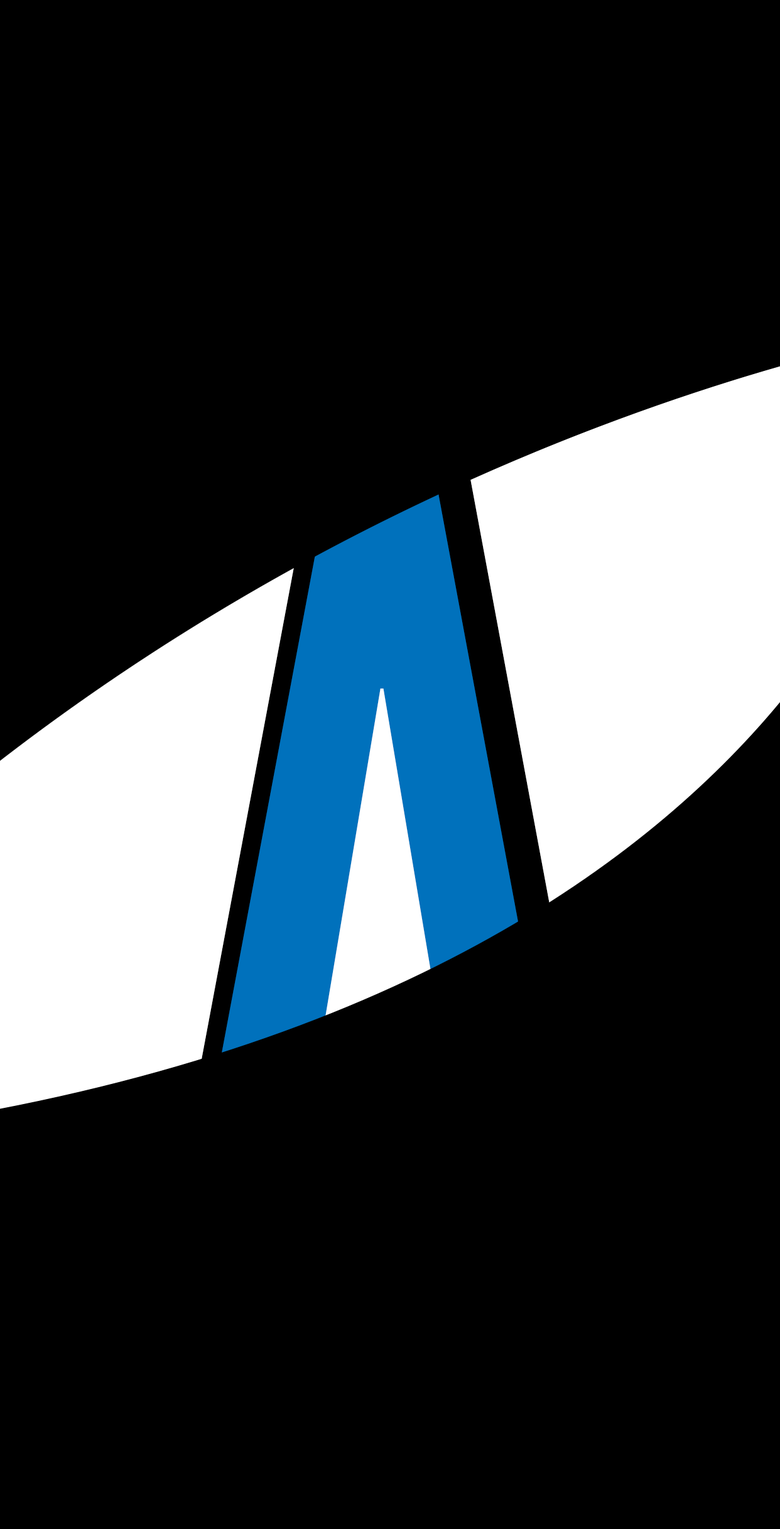
<style>
.page{position:relative;width:780px;height:1529px;background:#000000}
.page>*{position:absolute;margin:0}
.t1{font:1428.2px "GillSansMT-Condensed";color:#000000}
.t2{font:1224.2px "GillSansMT-Condensed"}
</style>
<div class="page">
<p class="t1" style="left:146px;top:392px;width:487px;height:960px">A</p>
<p class="t2" style="left:173px;top:488px;width:417px;height:822px">A</p>
</div>
